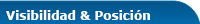
<style>
.page{position:relative;width:200px;height:24px}
.page>*{position:absolute;margin:0}
.t1{font:12px "Verdana-Bold"}
.t2{font:12px "Verdana-Bold";color:#ffffff}
</style>
<div class="page">
<p class="t1" style="left:6px;top:11px;width:93px;height:11px">Campos Extra</p>
<p class="t2" style="left:6px;top:10px;width:144px;height:10px">Visibilidad &amp; Posición</p>
</div>
